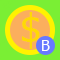
<style>
.page{position:relative;width:60px;height:60px;background:#7aef34}
.page>*{position:absolute;margin:0}
.t1{font:15px "Tahoma";color:#ffffff}
</style>
<div class="page">
<p class="t1" style="left:42px;top:40px;width:8px;height:11px">B</p>
</div>
